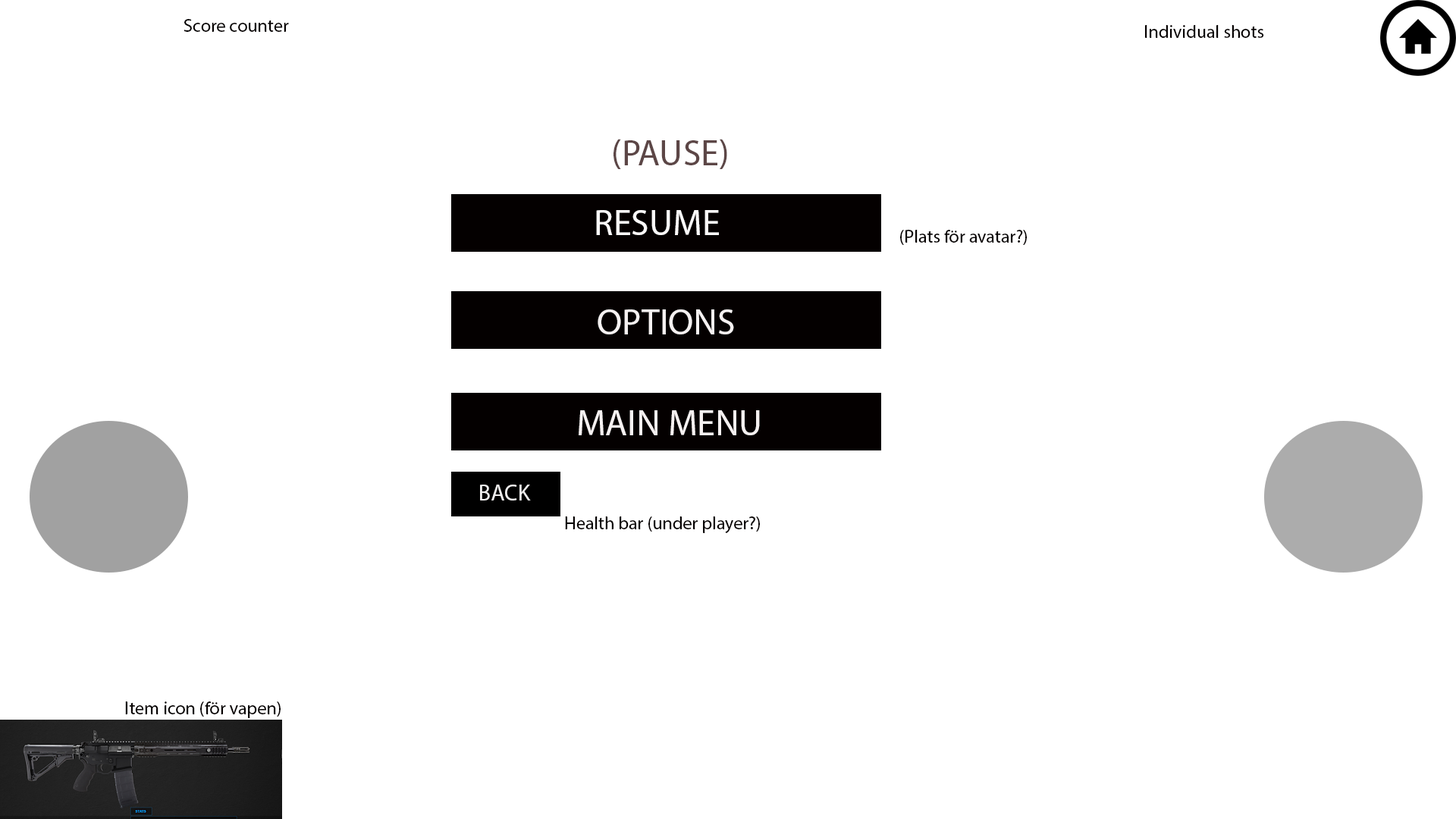
<style>
.page{position:relative;width:1456px;height:819px;background:#ffffff}
.page>*{position:absolute;margin:0}
.t1{font:18.2px "MyriadPro-Regular";color:#040000}
.t2{font:36.4px "MyriadPro-Regular";color:#5c4646}
.t3{font:36.4px "MyriadPro-Regular";color:#faf9f9}
.t4{font:36.4px "MyriadPro-Regular";color:#f5f1f1}
.t5{font:22.7px "MyriadPro-Regular";color:#eeeded}
</style>
<div class="page">
<p class="t1" style="left:184px;top:19px;width:105px;height:13px">Score counter</p>
<p class="t1" style="left:1145px;top:25px;width:119px;height:13px">Individual shots</p>
<p class="t2" style="left:613px;top:139px;width:114px;height:30px">(PAUSE)</p>
<p class="t3" style="left:596px;top:210px;width:123px;height:25px">RESUME</p>
<p class="t1" style="left:900px;top:230px;width:127px;height:15px">(Plats för avatar?)</p>
<p class="t4" style="left:598px;top:309px;width:136px;height:25px">OPTIONS</p>
<p class="t4" style="left:579px;top:410px;width:181px;height:25px">MAIN MENU</p>
<p class="t5" style="left:480px;top:485px;width:51px;height:15px">BACK</p>
<p class="t1" style="left:565px;top:516px;width:195px;height:17px">Health bar (under player?)</p>
<p class="t1" style="left:125px;top:701px;width:156px;height:17px">Item icon (för vapen)</p>
</div>
